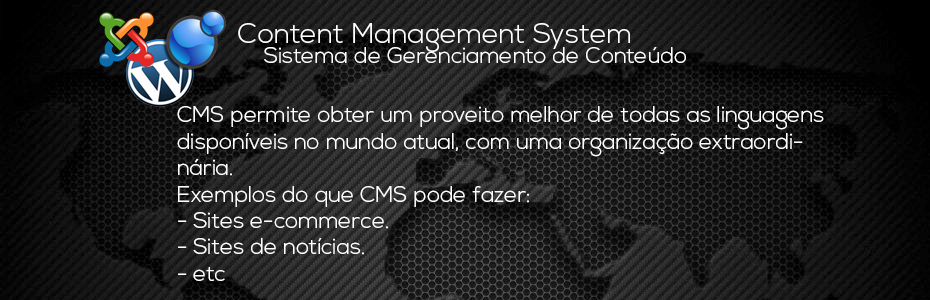
<style>
.page{position:relative;width:930px;height:300px}
.page>*{position:absolute;margin:0}
.t1{font:28px "NexaLight";color:#ffffff}
.t2{font:22px "NexaLight";color:#ffffff}
</style>
<div class="page">
<p class="t1" style="left:238px;top:23px;width:392px;height:29px">Content Management System</p>
<p class="t2" style="left:264px;top:47px;width:422px;height:16px">Sistema de Gerenciamento de Conteúdo</p>
<p class="t2" style="left:177px;top:106px;width:647px;height:175px">CMS permite obter um proveito melhor de todas as linguagens disponíveis no mundo atual, com uma organização extraordinária.<br>Exemplos do que CMS pode fazer:<br>- Sites e-commerce.<br>- Sites de notícias.<br>- etc</p>
</div>
